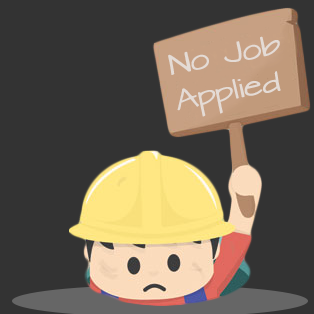
<style>
.page{position:relative;width:314px;height:314px;background:#333333}
.page>*{position:absolute;margin:0}
.t1{font:24px/36px "ArchitectsDaughter";color:#e4dbd5;scale:1.21 1}
</style>
<div class="page">
<p class="t1" style="left:168px;top:36px;width:113px;height:81px;rotate:-11deg">No Job <br>Applied</p>
</div>
